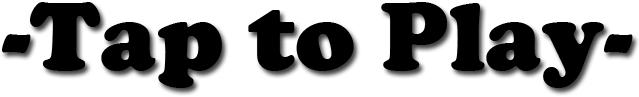
<style>
.page{position:relative;width:639px;height:97px;background:#ffffff}
.page>*{position:absolute;margin:0}
.t1{font:100px "CooperBlack";color:#000000}
</style>
<div class="page">
<p class="t1" style="left:2px;top:2px;width:631px;height:86px">-Tap to Play-</p>
</div>
